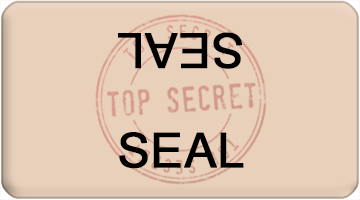
<style>
.page{position:relative;width:360px;height:200px;background:#e8d0bb}
.page>*{position:absolute;margin:0}
.t1{font:48px "ArialMT";color:#000000;font-weight:bold}
</style>
<div class="page">
<p class="t1" style="left:118px;top:32px;width:124px;height:37px;rotate:180deg">SEAL</p>
<p class="t1" style="left:119px;top:132px;width:125px;height:37px">SEAL</p>
</div>
